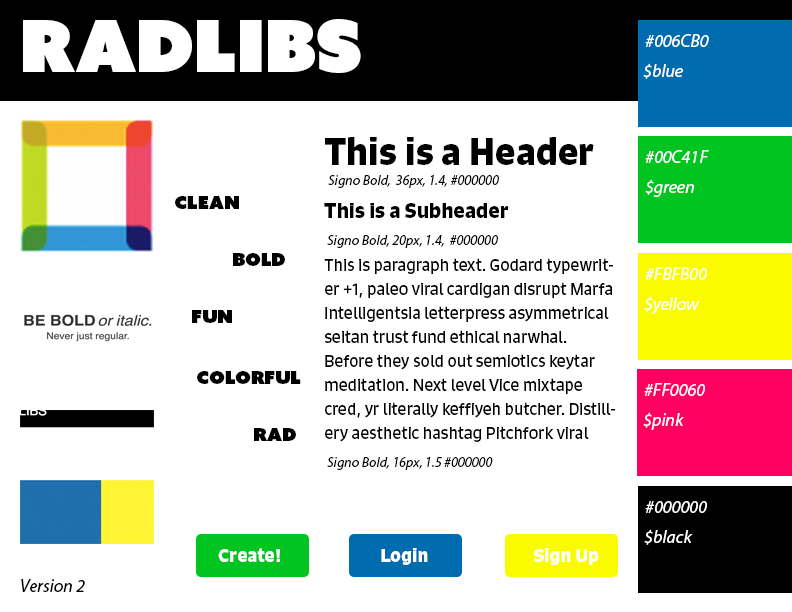
<style>
.page{position:relative;width:792px;height:612px;background:#fefffe}
.page>*{position:absolute;margin:0}
.t1{font:72px "AzoSansUber-Regular";color:#ffffff}
.t2{font:18px "MyriadPro-It";color:#ffffff}
.t3{font:36px "Signo-Bold";color:#000000}
.t4{font:14px "MyriadPro-It";color:#000000}
.t5{font:18px "AzoSansUber-Regular";color:#000000}
.t6{font:20px "Signo-Bold";color:#000000}
.t7{font:16px/24px "Signo-Regular";color:#000000}
.t8{font:18px "Signo-Bold";color:#ffffff}
.t9{font:18px "MyriadPro-It";color:#000000}
</style>
<div class="page">
<p class="t1" style="left:23px;top:19px;width:338px;height:54px">RADLIBS</p>
<p class="t2" style="left:645px;top:34px;width:64px;height:13px">#006CB0</p>
<p class="t2" style="left:643px;top:63px;width:40px;height:16px">$blue</p>
<p class="t3" style="left:325px;top:137px;width:269px;height:28px">This is a Header</p>
<p class="t2" style="left:645px;top:150px;width:64px;height:13px">#00C41F</p>
<p class="t4" style="left:328px;top:175px;width:171px;height:13px">Signo Bold,  36px, 1.4, #000000</p>
<p class="t2" style="left:645px;top:179px;width:49px;height:18px">$green</p>
<p class="t5" style="left:175px;top:196px;width:64px;height:13px">clean</p>
<p class="t6" style="left:324px;top:203px;width:185px;height:15px">This is a Subheader</p>
<p class="t4" style="left:327px;top:235px;width:171px;height:13px">Signo Bold, 20px, 1.4,  #000000</p>
<p class="t5" style="left:233px;top:253px;width:52px;height:13px">bold</p>
<p class="t7" style="left:324px;top:258px;width:291px;height:184px">This is paragraph text. Godard typewriter +1, paleo viral cardigan disrupt Marfa Intelligentsia letterpress asymmetrical seitan trust fund ethical narwhal. Before they sold out semiotics keytar meditation. Next level Vice mixtape cred, yr literally keffiyeh butcher. Distillery aesthetic hashtag Pitchfork viral salvia. This is a link. Wolf yr letterpress stumptown, distillery farm-to-table gastropub tousled iPhone vegan kale chips semiotics.</p>
<p class="t2" style="left:645px;top:267px;width:62px;height:13px">#FBFB00</p>
<p class="t2" style="left:644px;top:296px;width:56px;height:18px">$yellow</p>
<p class="t5" style="left:192px;top:310px;width:40px;height:13px">fun</p>
<p class="t5" style="left:197px;top:371px;width:104px;height:13px">colorful</p>
<p class="t2" style="left:644px;top:383px;width:61px;height:13px">#FF0060</p>
<p class="t2" style="left:643px;top:412px;width:41px;height:18px">$pink</p>
<p class="t5" style="left:254px;top:428px;width:42px;height:13px">rad</p>
<p class="t4" style="left:327px;top:457px;width:166px;height:13px">Signo Bold, 16px, 1.5 #000000</p>
<p class="t2" style="left:645px;top:501px;width:62px;height:12px">#000000</p>
<p class="t2" style="left:644px;top:529px;width:49px;height:16px">$black</p>
<p class="t8" style="left:218px;top:548px;width:62px;height:14px">Create!</p>
<p class="t8" style="left:381px;top:548px;width:47px;height:17px">Login</p>
<p class="t8" style="left:534px;top:548px;width:65px;height:17px">Sign Up</p>
<p class="t9" style="left:21px;top:579px;width:64px;height:13px">Version 2</p>
</div>
